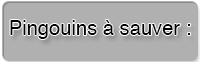
<style>
.page{position:relative;width:200px;height:62px;background:#b1b0b0}
.page>*{position:absolute;margin:0}
.t1{font:20.3px "Helvetica";color:#030303}
</style>
<div class="page">
<p class="t1" style="left:10px;top:20px;width:181px;height:19px">Pingouins à sauver :</p>
</div>
